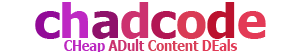
<style>
.page{position:relative;width:300px;height:52px;background:#ffffff}
.page>*{position:absolute;margin:0}
.t1{font:46.9px "Tahoma-Bold";letter-spacing:-0.01em;color:#920a97;scale:1.06 1}
.t2{font:46.9px "Tahoma-Bold";letter-spacing:-0.01em;color:#be28c3;scale:1.06 1}
.t3{font:46.9px "Tahoma-Bold";letter-spacing:-0.01em;color:#8f116b;scale:1.06 1}
.t4{font:46.9px "Tahoma-Bold";letter-spacing:-0.01em;color:#cc316f;scale:1.06 1}
.t5{font:46.9px "Tahoma-Bold";letter-spacing:-0.01em;color:#b21654;scale:1.06 1}
.t6{font:46.9px "Tahoma-Bold";letter-spacing:-0.01em;color:#d93b55;scale:1.06 1}
.t7{font:46.9px "Tahoma-Bold";letter-spacing:-0.01em;color:#bb122e;scale:1.06 1}
.t8{font:46.9px "Tahoma-Bold";letter-spacing:-0.01em;color:#e33a56;scale:1.06 1}
.t9{font:15.2px "Tahoma-Bold";letter-spacing:-0.01em;color:#d83f58;scale:0.85 1}
.t10{font:15.2px "Tahoma-Bold";letter-spacing:-0.01em;color:#bc29c1;scale:0.85 1}
.t11{font:15.2px "Tahoma-Bold";letter-spacing:-0.01em;color:#ca326f;scale:0.85 1}
.t12{font:15.2px "Tahoma-Bold";letter-spacing:-0.01em;color:#e13a56;scale:0.85 1}
</style>
<div class="page">
<p class="t1" style="left:35px;top:2px;width:231px;height:37px">c<span class="t2">h</span><span class="t3">a</span><span class="t4">d</span><span class="t5">c</span><span class="t6">o</span><span class="t7">d</span><span class="t8">e</span></p>
<p class="t9" style="left:64px;top:39px;width:173px;height:15px"><span class="t10">CHeap </span><span class="t11">ADult </span>Content <span class="t12">DEals</span></p>
</div>
